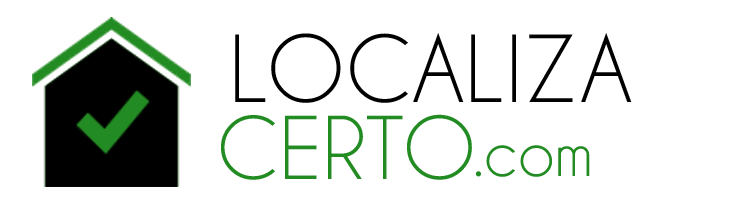
<style>
.page{position:relative;width:731px;height:200px;background:#ffffff}
.page>*{position:absolute;margin:0}
.t1{font:86.6px "CaviarDreams";color:#000000}
.t2{font:81px "CaviarDreams";color:#228b22}
.t3{font:58.7px "CaviarDreams";color:#228b22}
</style>
<div class="page">
<p class="t1" style="left:235px;top:33px;width:397px;height:70px">LOCALIZA</p>
<p class="t2" style="left:221px;top:114px;width:251px;height:66px">CERTO</p>
<p class="t3" style="left:475px;top:145px;width:115px;height:32px">.com</p>
</div>
